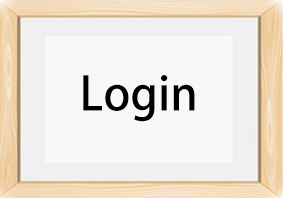
<style>
.page{position:relative;width:283px;height:198px;background:#f8f8f8}
.page>*{position:absolute;margin:0}
.t1{font:46px "AdobeHeitiStd-Regular";color:#000000}
</style>
<div class="page">
<p class="t1" style="left:83px;top:75px;width:112px;height:47px">Login</p>
</div>
